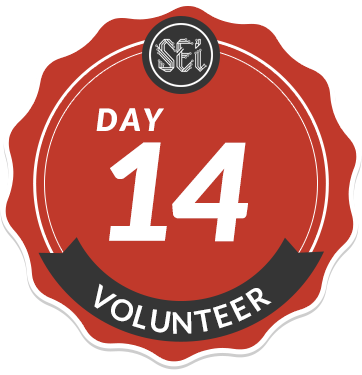
<style>
.page{position:relative;width:362px;height:375px;background:#c0392b}
.page>*{position:absolute;margin:0}
.t1{font:30.6px/110px "Lato-BlackItalic";letter-spacing:0.14em;color:#ffffff}
.t2{font:134.6px/110px "Lato-BlackItalic";letter-spacing:-0.02em;color:#ffffff}
.t3{font:29.7px/66.3px "Lato-Bold";letter-spacing:0.1em;color:#ffffff}
</style>
<div class="page">
<p class="t1" style="left:96px;top:108px;width:152px;height:134px">DAY<br><span class="t2">14</span></p>
<p class="t3" style="left:94px;top:283px;width:178px;height:51px;text-align:center">VOLUNTEER</p>
</div>
